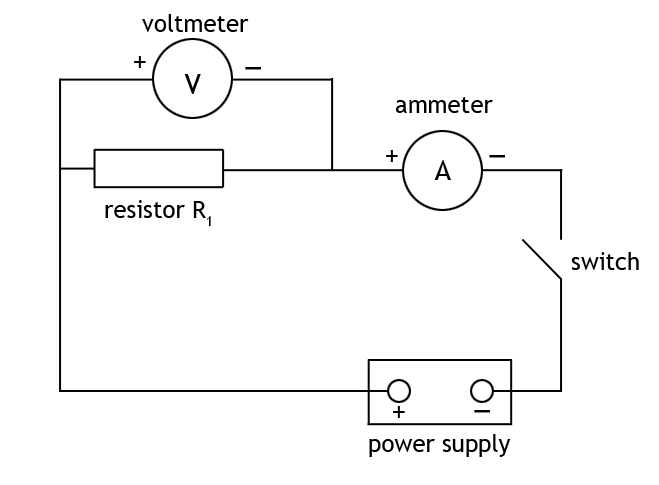
<style>
.page{position:relative;width:659px;height:485px;background:#ffffff}
.page>*{position:absolute;margin:0}
.t1{font:24px "TrebuchetMS";color:#000000}
.t2{font:48px "TrebuchetMS";color:#000000}
.t3{font:48px "TrebuchetMS";color:#000000;font-weight:bold}
</style>
<div class="page">
<p class="t1" style="left:142px;top:14px;width:107px;height:18px">voltmeter</p>
<p class="t2" style="left:134px;top:56px;width:12px;height:12px">+</p>
<p class="t2" style="left:184px;top:74px;width:17px;height:20px">V</p>
<p class="t3" style="left:245px;top:67px;width:16px;height:3px">_</p>
<p class="t1" style="left:395px;top:97px;width:98px;height:16px">ammeter</p>
<p class="t2" style="left:386px;top:150px;width:12px;height:12px">+</p>
<p class="t2" style="left:434px;top:160px;width:17px;height:20px">A</p>
<p class="t3" style="left:489px;top:155px;width:16px;height:3px">_</p>
<p class="t1" style="left:105px;top:200px;width:106px;height:26px">resistor R1</p>
<p class="t1" style="left:571px;top:252px;width:68px;height:18px">switch</p>
<p class="t2" style="left:393px;top:406px;width:12px;height:12px">+</p>
<p class="t3" style="left:474px;top:410px;width:16px;height:3px">_</p>
<p class="t1" style="left:369px;top:434px;width:142px;height:23px">power supply</p>
</div>
